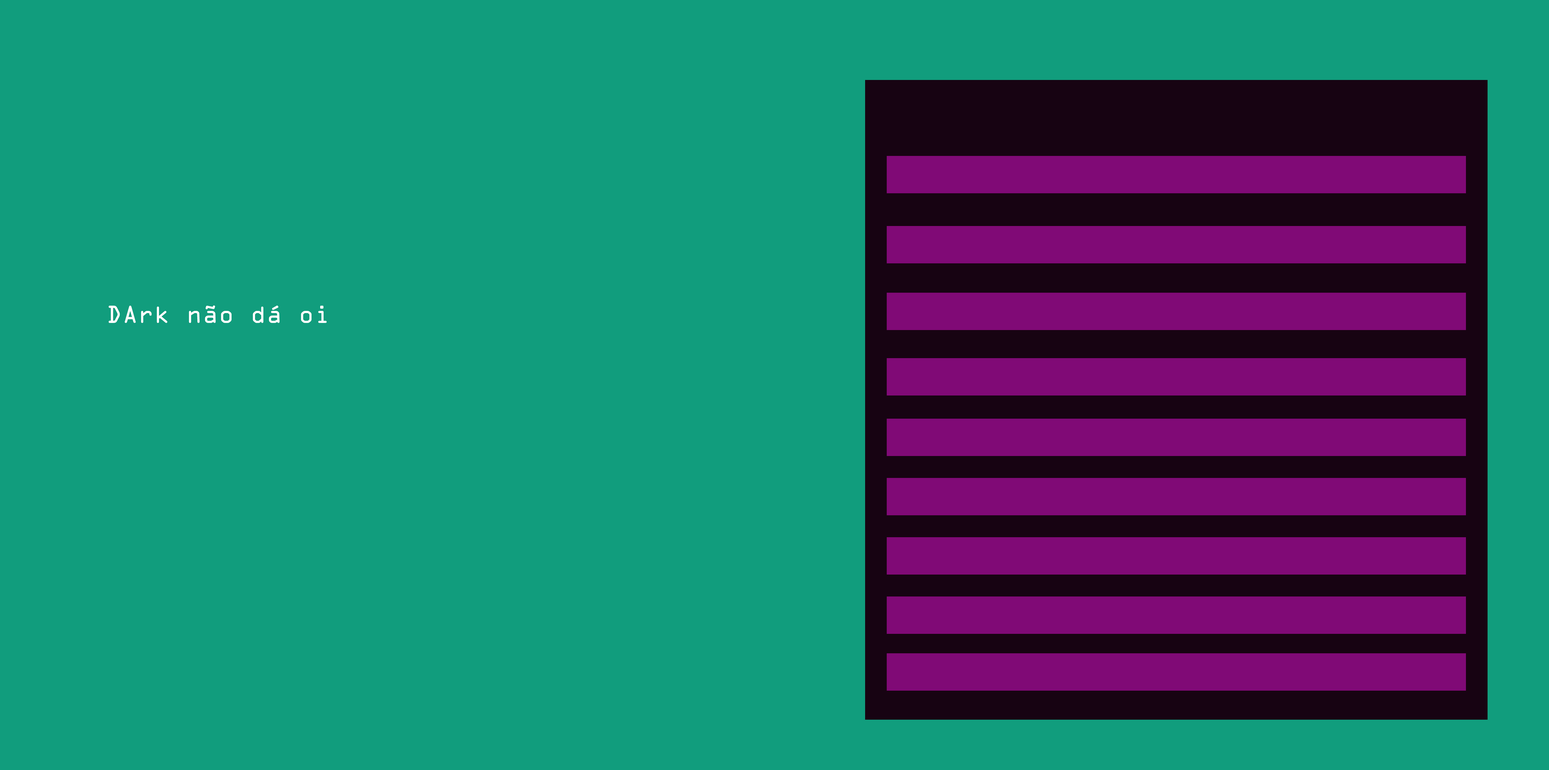
<style>
.page{position:relative;width:1549px;height:770px;background:#119d7d}
.page>*{position:absolute;margin:0}
.t1{font:22.2px "OCRAStd";color:#ffffff}
</style>
<div class="page">
<p class="t1" style="left:109px;top:305px;width:218px;height:18px">DArk não dá oi</p>
</div>
